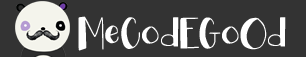
<style>
.page{position:relative;width:306px;height:57px;background:#333333}
.page>*{position:absolute;margin:0}
.t1{font:30px "DJBHOLLYJOLLYB'GOLLY";color:#ffffff}
</style>
<div class="page">
<p class="t1" style="left:78px;top:16px;width:208px;height:35px">MeCodEGoOd</p>
</div>
